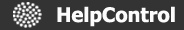
<style>
.page{position:relative;width:184px;height:30px;background:#333333}
.page>*{position:absolute;margin:0}
.t1{font:20px "Tahoma-Bold";color:#fcfcfc}
</style>
<div class="page">
<p class="t1" style="left:57px;top:6px;width:118px;height:21px">HelpControl</p>
</div>
